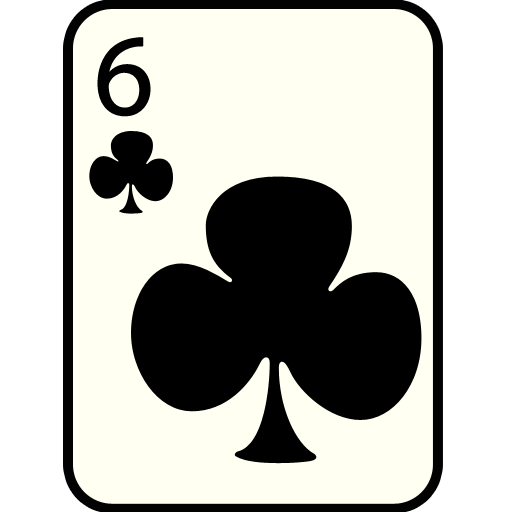
<style>
.page{position:relative;width:512px;height:512px;background:#fffff2}
.page>*{position:absolute;margin:0}
.t1{font:200px "MyriadPro-Regular";letter-spacing:-0.05em;color:#000000;font-variant:small-caps;font-weight:bold}
</style>
<div class="page">
<p class="t1" style="left:97px;top:37px;width:54px;height:80px">6</p>
</div>
